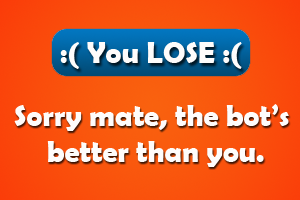
<style>
.page{position:relative;width:300px;height:200px}
.page>*{position:absolute;margin:0}
.t1{font:30px "BerlinSansFBDemi-Bold";color:#fefcfb}
</style>
<div class="page">
<p class="t1" style="left:60px;top:42px;width:182px;height:27px">:( You LOSE :(</p>
<p class="t1" style="left:14px;top:104px;width:275px;height:63px;text-align:center">Sorry mate, the bot’s<br> better than you.</p>
</div>
